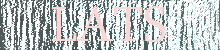
<style>
.page{position:relative;width:220px;height:50px;background:#ffffff}
.page>*{position:absolute;margin:0}
.t1{font:50px "Sylfaen";color:#fad8d8}
</style>
<div class="page">
<p class="t1" style="left:51px;top:6px;width:115px;height:36px">LATS</p>
</div>
